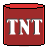
<style>
.page{position:relative;width:48px;height:48px;background:#9f2a2a}
.page>*{position:absolute;margin:0}
.t1{font:19.8px "BernardMT-Condensed";color:#ffffff;scale:1.34 1}
</style>
<div class="page">
<p class="t1" style="left:6px;top:18px;width:37px;height:17px">TNT</p>
</div>
